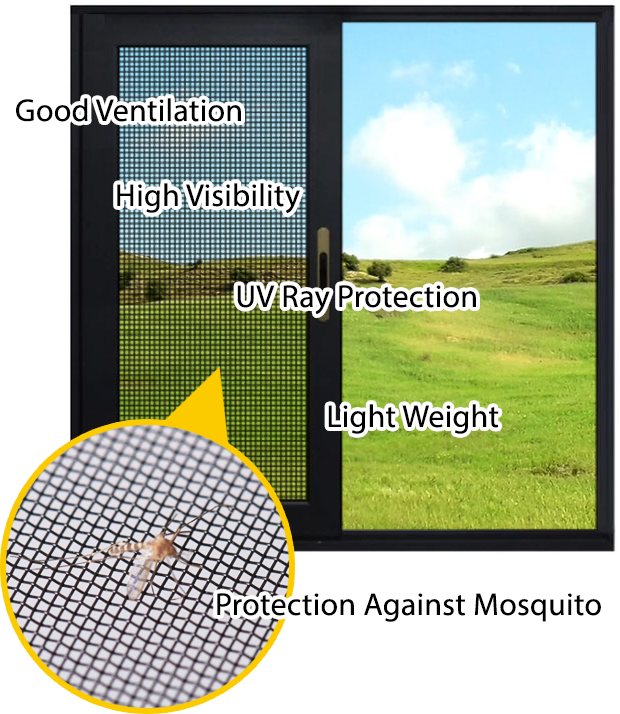
<style>
.page{position:relative;width:620px;height:714px;background:#ffffff}
.page>*{position:absolute;margin:0}
.t1{font:31.8px "MyriadPro-Regular";letter-spacing:0.01em;color:#000000}
</style>
<div class="page">
<p class="t1" style="left:16px;top:98px;width:225px;height:24px">Good Ventilation</p>
<p class="t1" style="left:117px;top:183px;width:183px;height:31px">High Visibility</p>
<p class="t1" style="left:237px;top:285px;width:239px;height:30px">UV Ray Protection</p>
<p class="t1" style="left:328px;top:404px;width:171px;height:30px">Light Weight</p>
<p class="t1" style="left:217px;top:593px;width:384px;height:29px">Protection Against Mosquito</p>
</div>
